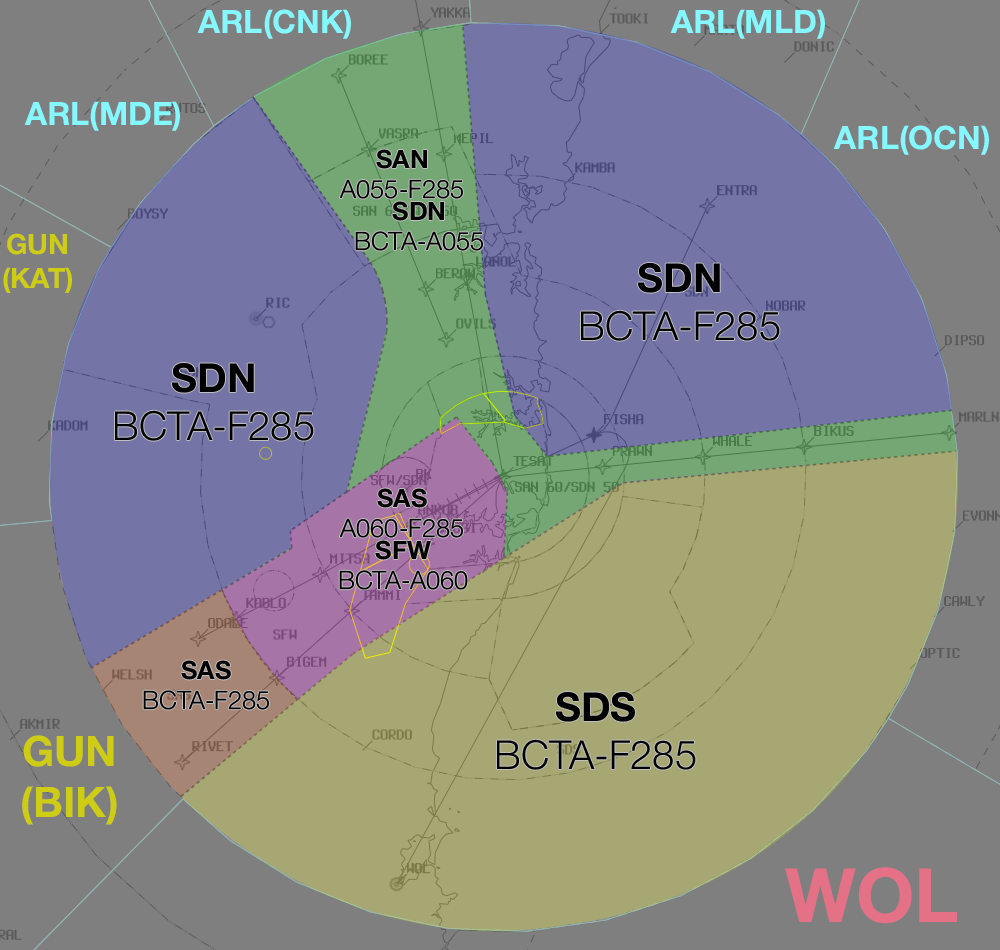
<style>
.page{position:relative;width:1000px;height:950px;background:#7f7f7f}
.page>*{position:absolute;margin:0}
.t1{font:32.2px "HelveticaNeue-Bold";color:#85f8ff}
.t2{font:25.3px "HelveticaNeue-Light";color:#000000}
.t3{font:25.3px "HelveticaNeue-Bold";color:#000000}
.t4{font:28px "HelveticaNeue-Bold";color:#cecc13}
.t5{font:28px "MyriadPro-Regular";color:#cecc13}
.t6{font:40px "HelveticaNeue-Light";color:#000000}
.t7{font:40px "HelveticaNeue-Bold";color:#000000}
.t8{font:42.2px "HelveticaNeue-Bold";color:#cecc13}
.t9{font:42.2px "MyriadPro-Regular";color:#cecc13}
.t10{font:75px "HelveticaNeue-Bold";color:#e57187}
</style>
<div class="page">
<p class="t1" style="left:197px;top:9px;width:154px;height:30px">ARL(CNK)</p>
<p class="t1" style="left:670px;top:9px;width:155px;height:30px">ARL(MLD)</p>
<p class="t1" style="left:24px;top:101px;width:156px;height:30px">ARL(MDE)</p>
<p class="t1" style="left:833px;top:125px;width:156px;height:30px">ARL(OCN)</p>
<p class="t2" style="left:340px;top:149px;width:123px;height:50px;text-align:center"><span class="t3">SAN<br></span>A055-F285</p>
<p class="t2" style="left:355px;top:201px;width:128px;height:50px;text-align:center"><span class="t3">SDN<br></span>BCTA-A055</p>
<p class="t4" style="left:3px;top:233px;width:69px;height:60px;text-align:center">GUN<span class="t5"><br></span>(KAT)</p>
<p class="t6" style="left:581px;top:263px;width:199px;height:78px;text-align:center"><span class="t7">SDN<br></span>BCTA-F285</p>
<p class="t6" style="left:115px;top:363px;width:199px;height:78px;text-align:center"><span class="t7">SDN<br></span>BCTA-F285</p>
<p class="t2" style="left:340px;top:488px;width:123px;height:50px;text-align:center"><span class="t3">SAS<br></span>A060-F285</p>
<p class="t2" style="left:339px;top:540px;width:129px;height:50px;text-align:center"><span class="t3">SFW<br></span>BCTA-A060</p>
<p class="t2" style="left:143px;top:660px;width:126px;height:50px;text-align:center"><span class="t3">SAS<br></span>BCTA-F285</p>
<p class="t6" style="left:497px;top:692px;width:199px;height:78px;text-align:center"><span class="t7">SDS<br></span>BCTA-F285</p>
<p class="t8" style="left:22px;top:735px;width:95px;height:90px;text-align:center">GUN<span class="t9"><br></span>(BIK)</p>
<p class="t10" style="left:785px;top:867px;width:172px;height:57px">WOL</p>
</div>
